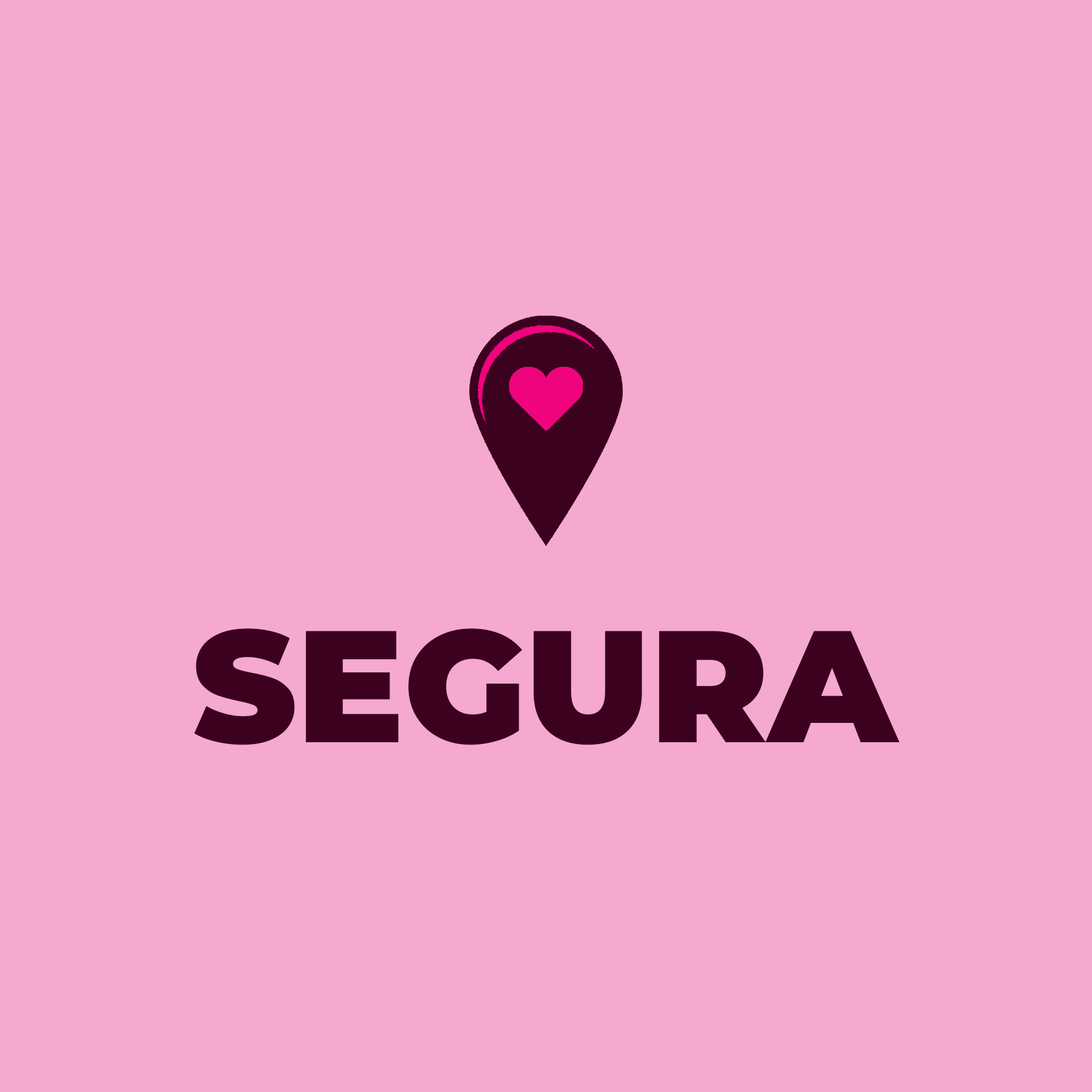
<style>
.page{position:relative;width:1092px;height:1092px;background:#f5a8d0}
.page>*{position:absolute;margin:0}
.t1{font:158.8px "Montserrat-Black";color:#3d0120}
</style>
<div class="page">
<p class="t1" style="left:194px;top:628px;width:706px;height:117px">SEGURA</p>
</div>
